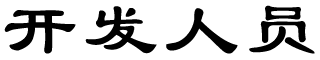
<style>
.page{position:relative;width:320px;height:60px;background:#ffffff}
.page>*{position:absolute;margin:0}
.t1{font:75px "LiSu";letter-spacing:0.075em;color:#000000}
</style>
<div class="page">
<p class="t1" style="left:4px;top:5px;width:311px;height:49px">开发人员</p>
</div>
